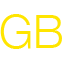
<style>
.page{position:relative;width:64px;height:64px;background:#ffffff}
.page>*{position:absolute;margin:0}
.t1{font:46px "HelveticaNeue-Light";color:#ffe500}
</style>
<div class="page">
<p class="t1" style="left:0px;top:14px;width:62px;height:35px">GB</p>
</div>
